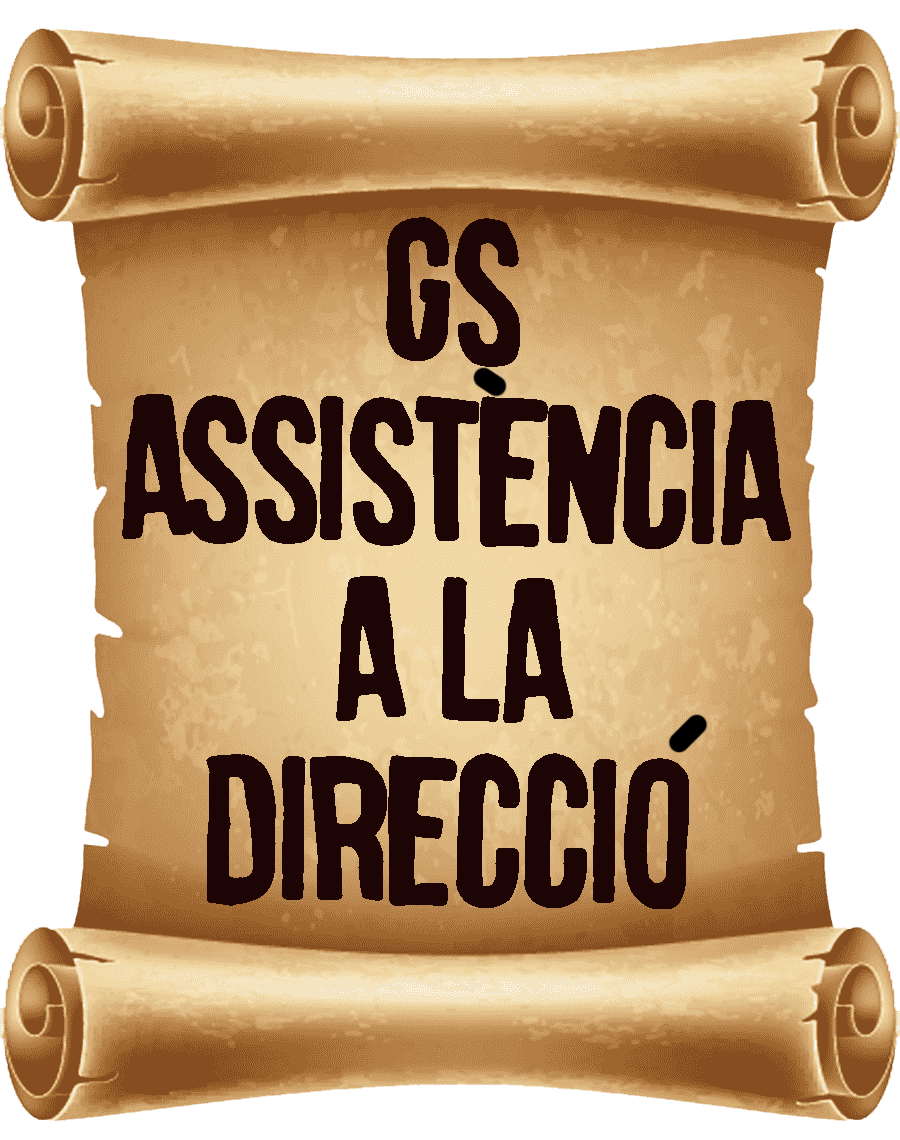
<style>
.page{position:relative;width:900px;height:1140px}
.page>*{position:absolute;margin:0}
.t1{font:199.8px/180px "camellodespit";color:#1e0505}
</style>
<div class="page">
<p class="t1" style="left:122px;top:217px;width:669px;height:692px;text-align:center;rotate:1deg">gS<br>ASSIsTENCIA<br>A LA<br>DIRECCIO</p>
</div>
